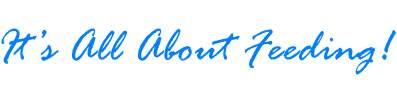
<style>
.page{position:relative;width:397px;height:95px;background:#ffffff}
.page>*{position:absolute;margin:0}
.t1{font:48px "RageItalic";color:#0080ff}
</style>
<div class="page">
<p class="t1" style="left:1px;top:28px;width:395px;height:47px">It’s All About Feeding!</p>
</div>
